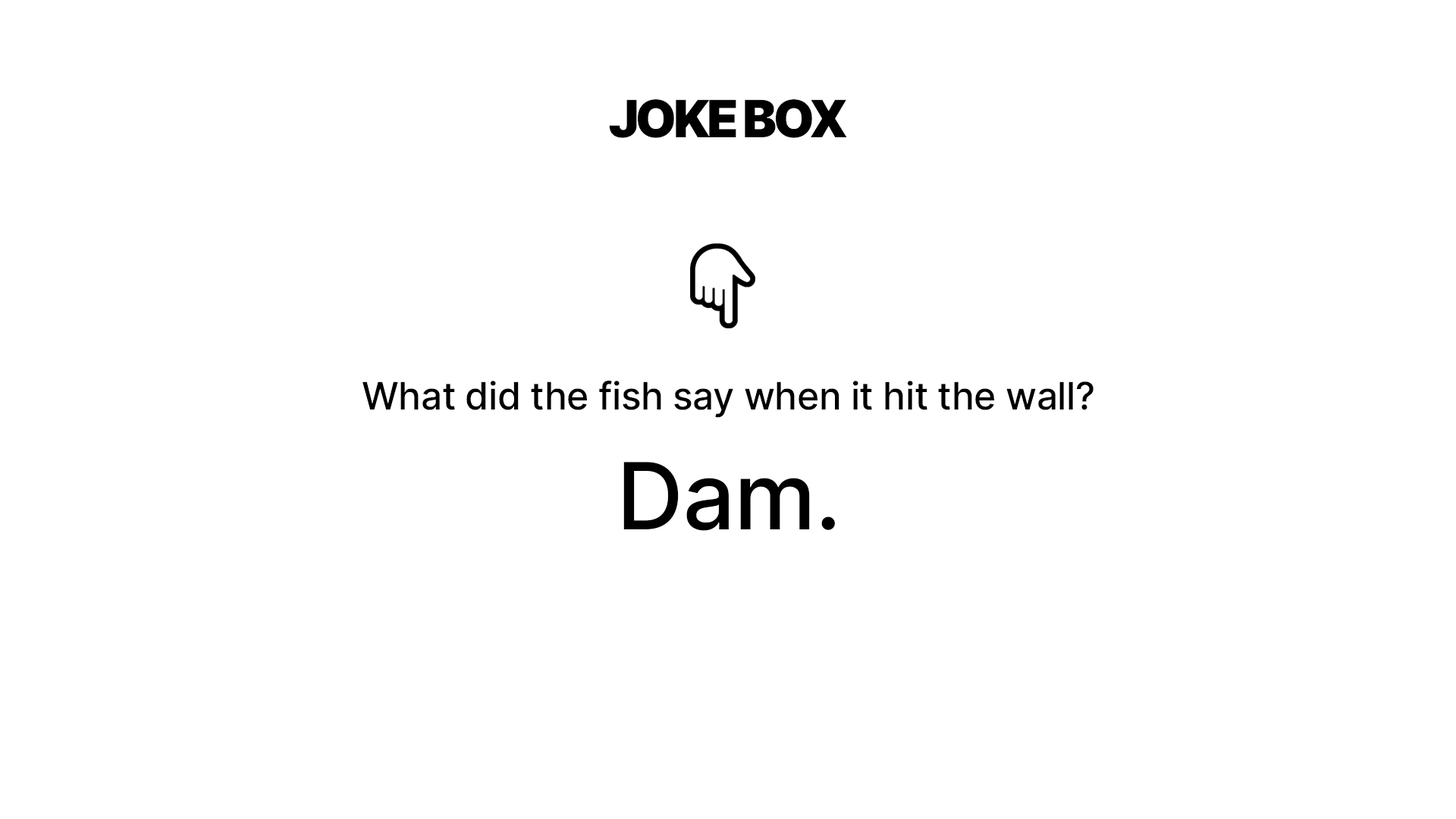
<style>
.page{position:relative;width:1456px;height:819px;background:#ffffff}
.page>*{position:absolute;margin:0}
.t1{font:51.4px "Inter-Black";letter-spacing:-0.06em;color:#000000}
.t2{font:37.9px "Inter-Medium";letter-spacing:-0.01em;color:#000000}
.t3{font:92.5px "Inter-Medium";letter-spacing:-0.01em;color:#000000}
</style>
<div class="page">
<p class="t1" style="left:609px;top:99px;width:238px;height:39px">JOKE BOX</p>
<p class="t2" style="left:362px;top:381px;width:732px;height:37px">What did the fish say when it hit the wall?</p>
<p class="t3" style="left:623px;top:462px;width:212px;height:69px">Dam.</p>
</div>
